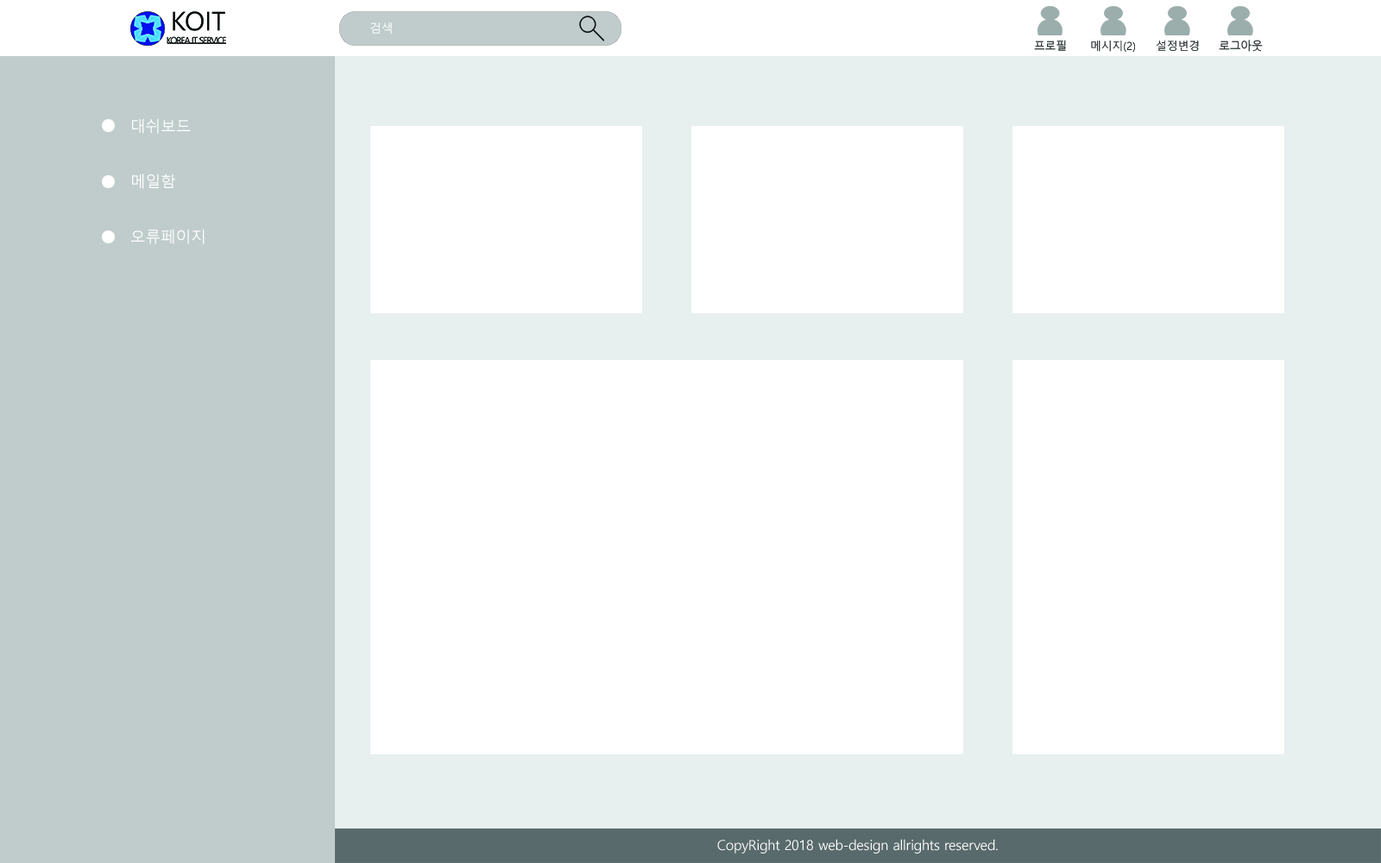
<style>
.page{position:relative;width:1381px;height:863px;background:#ffffff}
.page>*{position:absolute;margin:0}
.t1{font:12.1px "MalgunGothic";letter-spacing:-0.02em;color:#ffffff}
.t2{font:11.4px "MalgunGothic";letter-spacing:-0.02em;color:#202728}
.t3{font:11.3px "MalgunGothic";letter-spacing:-0.02em;color:#202728}
.t4{font:11.6px "MalgunGothic";letter-spacing:-0.02em;color:#202728;scale:0.96 1}
.t5{font:15.5px/55.3px "MalgunGothic";letter-spacing:-0.02em;color:#ffffff}
.t6{font:13.8px "MalgunGothic";letter-spacing:-0.02em;color:#ffffff}
</style>
<div class="page">
<p class="t1" style="left:370px;top:22px;width:22px;height:13px">검색</p>
<p class="t2" style="left:1034px;top:40px;width:32px;height:11px">프로필</p>
<p class="t3" style="left:1091px;top:41px;width:44px;height:11px">메시지(2)</p>
<p class="t3" style="left:1157px;top:41px;width:42px;height:10px">설정변경</p>
<p class="t4" style="left:1219px;top:40px;width:44px;height:12px">로그아웃</p>
<p class="t5" style="left:131px;top:118px;width:74px;height:126px">대쉬보드<br>메일함<br>오류페이지</p>
<p class="t6" style="left:717px;top:839px;width:281px;height:15px">CopyRight 2018 web-design allrights reserved.</p>
</div>
